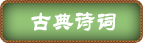
<style>
.page{position:relative;width:143px;height:43px}
.page>*{position:absolute;margin:0}
.t1{font:25px "STLiti";color:#ffffff;font-weight:bold;scale:0.85 1}
</style>
<div class="page">
<p class="t1" style="left:31px;top:12px;width:85px;height:19px">古典诗词</p>
</div>
